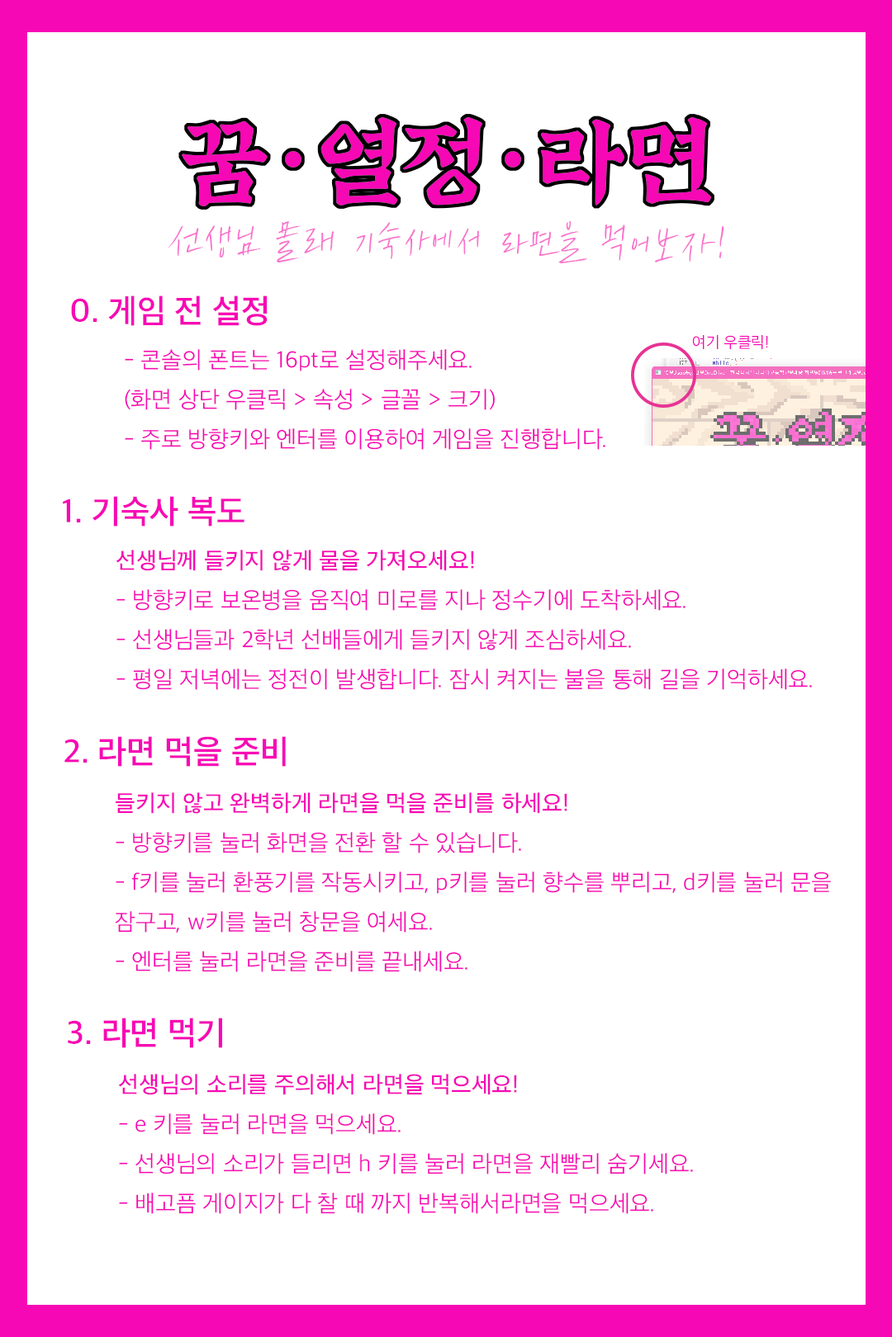
<style>
.page{position:relative;width:892px;height:1337px;background:#ffffff}
.page>*{position:absolute;margin:0}
.t1{font:43.7px "SDGongPenTTF-aLt";letter-spacing:0.075em;color:#f971cb}
.t2{font:31.4px "SDGothicNeoa-fSm";color:#f708b5}
.t3{font:14.9px "SDGothicNeoa-cLt";color:#f708b5}
.t4{font:22.3px/39.6px "SDGothicNeoa-cLt";color:#f708b5}
.t5{font:22.3px/39.6px "SDGothicNeoa-eMd";color:#f708b5}
</style>
<div class="page">
<p class="t1" style="left:168px;top:221px;width:556px;height:42px">선생님 몰래 기숙사에서 라면을 먹어보자!</p>
<p class="t2" style="left:71px;top:296px;width:196px;height:30px">0. 게임 전 설정</p>
<p class="t3" style="left:692px;top:335px;width:76px;height:14px">여기 우클릭!</p>
<p class="t4" style="left:125px;top:349px;width:480px;height:101px">- 콘솔의 폰트는 16pt로 설정해주세요.<br>(화면 상단 우클릭 &gt; 속성 &gt; 글꼴 &gt; 크기)<br>- 주로 방향키와 엔터를 이용하여 게임을 진행합니다.</p>
<p class="t2" style="left:63px;top:496px;width:181px;height:31px">1. 기숙사 복도</p>
<p class="t4" style="left:116px;top:550px;width:696px;height:140px"><span class="t5">선생님께 들키지 않게 물을 가져오세요!<br></span>- 방향키로 보온병을 움직여 미로를 지나 정수기에 도착하세요.<br>- 선생님들과 2학년 선배들에게 들키지 않게 조심하세요.<br>- 평일 저녁에는 정전이 발생합니다. 잠시 켜지는 불을 통해 길을 기억하세요.</p>
<p class="t2" style="left:64px;top:736px;width:222px;height:31px">2. 라면 먹을 준비</p>
<p class="t4" style="left:115px;top:793px;width:716px;height:180px"><span class="t5">들키지 않고 완벽하게 라면을 먹을 준비를 하세요!<br></span>- 방향키를 눌러 화면을 전환 할 수 있습니다.<br>- f키를 눌러 환풍기를 작동시키고, p키를 눌러 향수를 뿌리고, d키를 눌러 문을<br>잠구고, w키를 눌러 창문을 여세요.<br>- 엔터를 눌러 라면을 준비를 끝내세요.</p>
<p class="t2" style="left:68px;top:1018px;width:154px;height:30px">3. 라면 먹기</p>
<p class="t4" style="left:118px;top:1074px;width:575px;height:140px"><span class="t5">선생님의 소리를 주의해서 라면을 먹으세요!<br></span>- e 키를 눌러 라면을 먹으세요.<br>- 선생님의 소리가 들리면 h 키를 눌러 라면을 재빨리 숨기세요.<br>- 배고픔 게이지가 다 찰 때 까지 반복해서라면을 먹으세요.</p>
</div>
